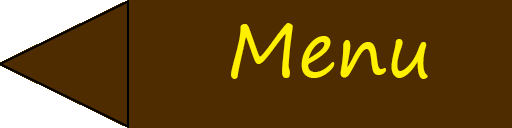
<style>
.page{position:relative;width:512px;height:128px;background:#4e2c00}
.page>*{position:absolute;margin:0}
.t1{font:75px "SegoePrint";color:#fff000}
</style>
<div class="page">
<p class="t1" style="left:231px;top:23px;width:197px;height:56px">Menu</p>
</div>
